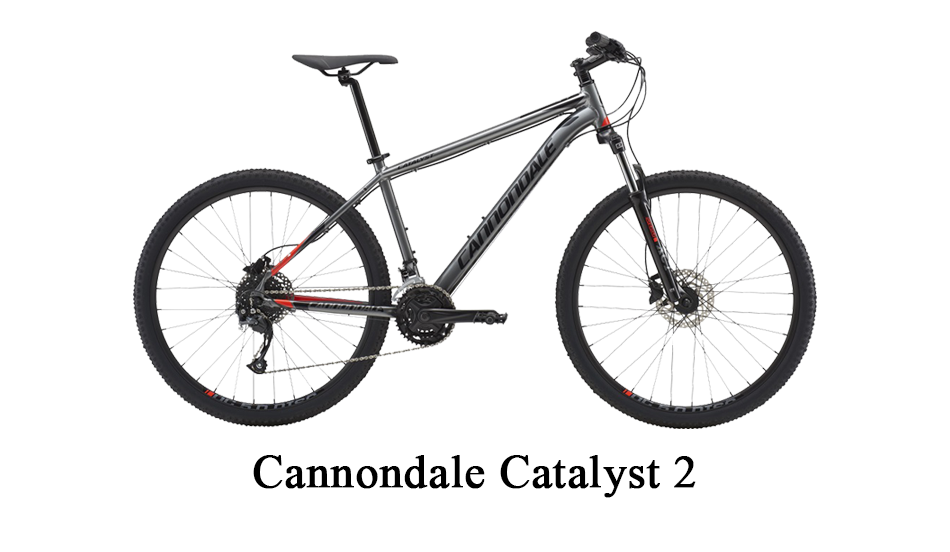
<style>
.page{position:relative;width:950px;height:552px;background:#ffffff}
.page>*{position:absolute;margin:0}
.t1{font:45.8px "TimesNewRomanPSMT";letter-spacing:0.005em;color:#000000;font-weight:bold}
</style>
<div class="page">
<p class="t1" style="left:253px;top:455px;width:443px;height:43px">Cannondale Catalyst 2</p>
</div>
